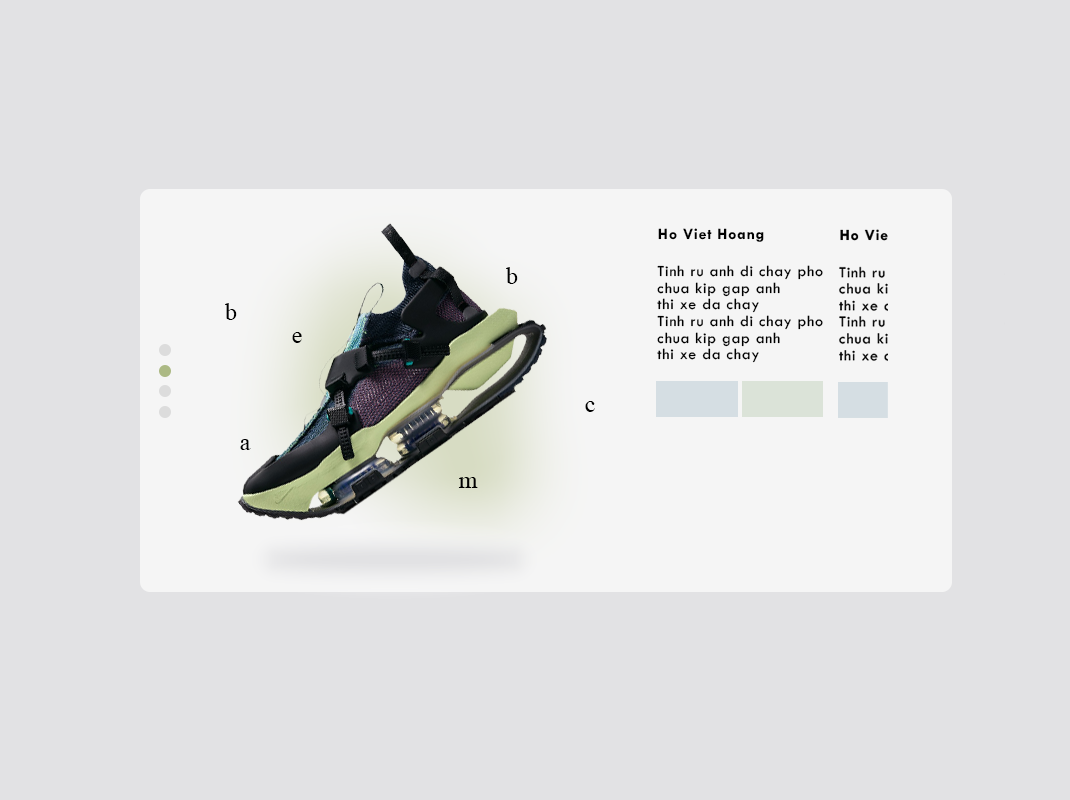
<style>
.page{position:relative;width:1070px;height:800px;background:#e2e2e4}
.page>*{position:absolute;margin:0}
.t1{font:16px "TwCenMT-Bold";letter-spacing:0.05em;color:#000000}
.t2{font:24px "TimesNewRomanPSMT";letter-spacing:0.05em;color:#000000}
.t3{font:16px/16.7px "TwCenMT-Regular";letter-spacing:0.05em;color:#000000}
</style>
<div class="page">
<p class="t1" style="left:658px;top:228px;width:106px;height:14px">Ho Viet Hoang</p>
<p class="t2" style="left:506px;top:267px;width:12px;height:17px">b</p>
<p class="t3" style="left:657px;top:265px;width:166px;height:98px">Tinh ru anh di chay pho<br>chua kip gap anh<br>thi xe da chay <br>Tinh ru anh di chay pho<br>chua kip gap anh<br>thi xe da chay</p>
<p class="t2" style="left:225px;top:303px;width:12px;height:17px">b</p>
<p class="t2" style="left:292px;top:332px;width:10px;height:11px">e</p>
<p class="t2" style="left:585px;top:401px;width:10px;height:11px">c</p>
<p class="t2" style="left:240px;top:439px;width:11px;height:11px">a</p>
<p class="t2" style="left:458px;top:477px;width:20px;height:11px">m</p>
</div>
